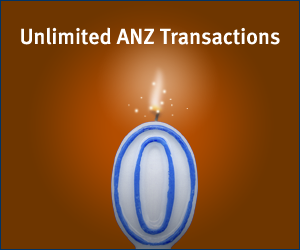
<style>
.page{position:relative;width:300px;height:250px;background:#6e3600}
.page>*{position:absolute;margin:0}
.t1{font:22px "MetaMediumLF-Roman";color:#ffffff}
</style>
<div class="page">
<p class="t1" style="left:21px;top:27px;width:259px;height:18px">Unlimited ANZ Transactions</p>
</div>
